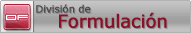
<style>
.page{position:relative;width:191px;height:33px}
.page>*{position:absolute;margin:0}
.t1{font:10px "Verdana";letter-spacing:-0.025em;color:#4b4848;font-weight:bold}
.t2{font:10px "Verdana";letter-spacing:-0.025em;color:#888888;font-weight:bold}
.t3{font:11.6px "911Porscha";color:#ffffff}
.t4{font:18px "Verdana";letter-spacing:-0.025em;color:#881811;font-weight:bold}
.t5{font:18px "Verdana";letter-spacing:-0.025em;font-weight:bold}
</style>
<div class="page">
<p class="t1" style="left:36px;top:4px;width:55px;height:9px">División de</p>
<p class="t2" style="left:37px;top:5px;width:55px;height:9px">División de</p>
<p class="t3" style="left:6px;top:14px;width:22px;height:7px">DF</p>
<p class="t4" style="left:59px;top:12px;width:108px;height:16px">Formulación</p>
<p class="t5" style="left:60px;top:13px;width:108px;height:16px">Formulación</p>
</div>
